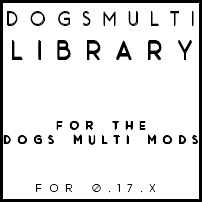
<style>
.page{position:relative;width:202px;height:202px;background:#ffffff}
.page>*{position:absolute;margin:0}
.t1{font:20.1px "AceSansDemo";letter-spacing:0.58em;color:#000000}
.t2{font:25.6px "AceSansDemo";letter-spacing:0.58em;color:#000000}
.t3{font:12px "AceSansDemo";letter-spacing:0.58em;color:#000000}
</style>
<div class="page">
<p class="t1" style="left:7px;top:11px;width:187px;height:14px">DOGSMULTI</p>
<p class="t1" style="left:7px;top:12px;width:187px;height:14px">DOGSMULTI</p>
<p class="t2" style="left:12px;top:40px;width:180px;height:18px">LIBRARY</p>
<p class="t2" style="left:12px;top:41px;width:180px;height:18px">LIBRARY</p>
<p class="t2" style="left:12px;top:41px;width:180px;height:18px">LIBRARY</p>
<p class="t2" style="left:12px;top:42px;width:180px;height:18px">LIBRARY</p>
<p class="t2" style="left:13px;top:42px;width:179px;height:18px">LIBRARY</p>
<p class="t3" style="left:3px;top:121px;width:194px;height:24px;text-align:center">FOR THE<br>DOGS MULTI MODS</p>
<p class="t3" style="left:3px;top:122px;width:194px;height:23px;text-align:center">FOR THE<br>DOGS MULTI MODS</p>
<p class="t3" style="left:3px;top:121px;width:194px;height:23px;text-align:center">FOR THE<br>DOGS MULTI MODS</p>
<p class="t3" style="left:4px;top:121px;width:194px;height:24px;text-align:center">FOR THE<br>DOGS MULTI MODS</p>
<p class="t3" style="left:36px;top:184px;width:120px;height:9px">FOR 0.17.X</p>
</div>
